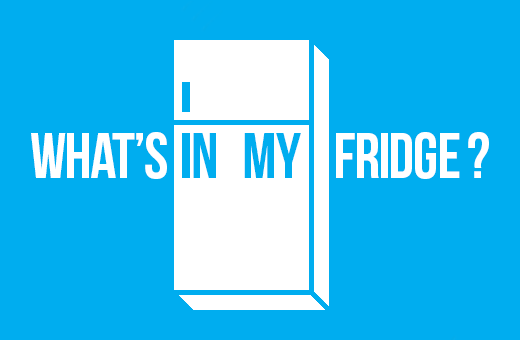
<style>
.page{position:relative;width:520px;height:340px;background:#00adef}
.page>*{position:absolute;margin:0}
.t1{font:64.3px "BebasNeue";letter-spacing:-0.025em;color:#ffffff}
.t2{font:64.3px "BebasNeue";letter-spacing:-0.025em;color:#00adef}
</style>
<div class="page">
<p class="t1" style="left:31px;top:132px;width:458px;height:47px">WHAT’S  <span class="t2"> N   MY    </span>FRIDGE ?</p>
</div>
